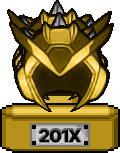
<style>
.page{position:relative;width:120px;height:153px;background:#ffffff}
.page>*{position:absolute;margin:0}
.t1{font:18px "InterTight-Black";letter-spacing:-0.04em;color:#000000}
</style>
<div class="page">
<p class="t1" style="left:39px;top:129px;width:43px;height:14px">201X</p>
</div>
